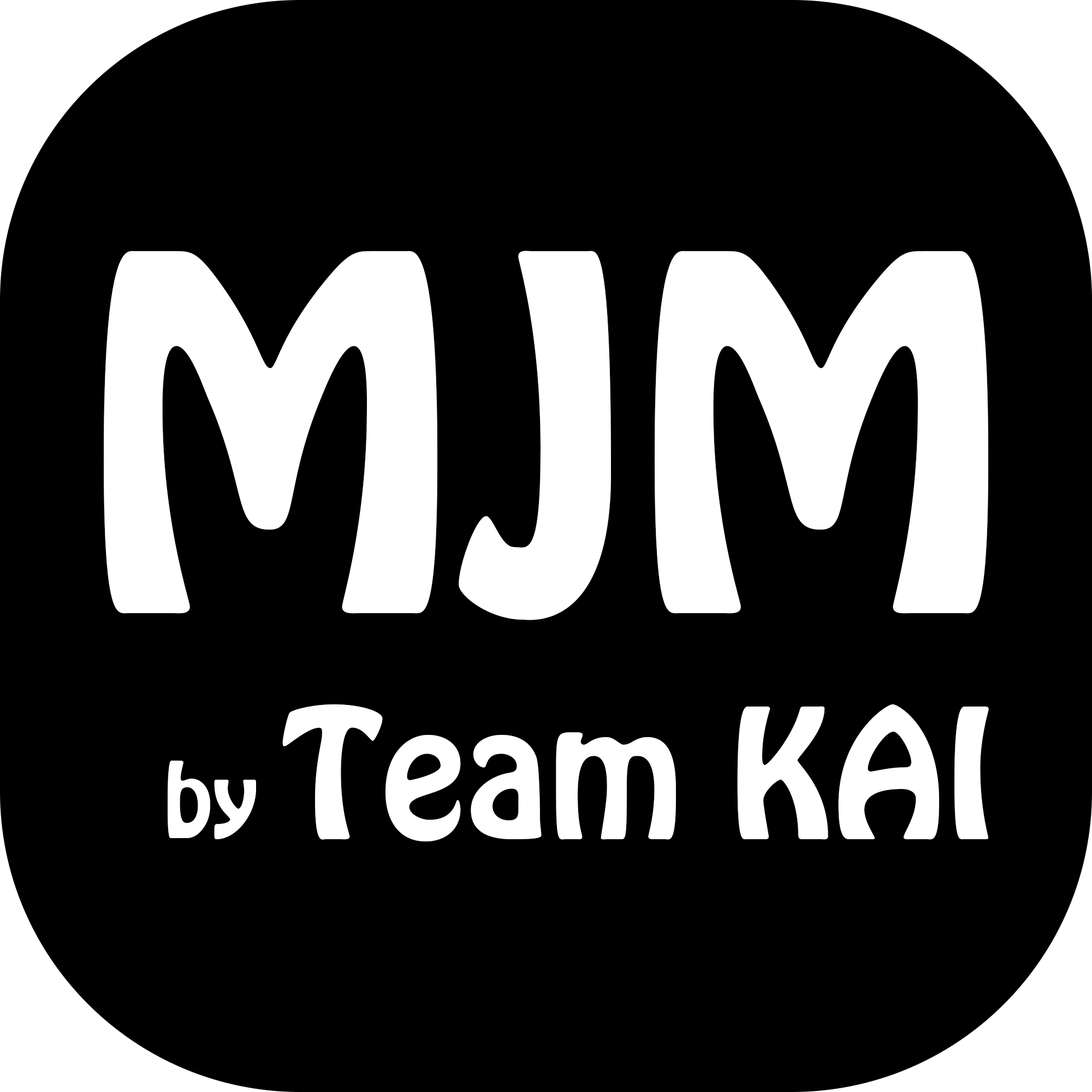
<style>
.page{position:relative;width:1092px;height:1092px;background:#000000}
.page>*{position:absolute;margin:0}
.t1{font:435px "HoboStd";color:#ffffff}
.t2{font:159.2px "HoboStd";color:#ffffff}
.t3{font:91px "HoboStd";color:#ffffff}
</style>
<div class="page">
<p class="t1" style="left:104px;top:251px;width:884px;height:369px">MJM</p>
<p class="t2" style="left:282px;top:704px;width:707px;height:138px">Team KAI</p>
<p class="t3" style="left:168px;top:761px;width:88px;height:78px">by</p>
</div>
